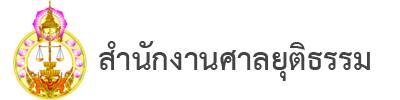
<style>
.page{position:relative;width:400px;height:100px;background:#ffffff}
.page>*{position:absolute;margin:0}
.t1{font:45.2px "THSarabunNew-Bold";color:#444444}
</style>
<div class="page">
<p class="t1" style="left:99px;top:41px;width:271px;height:40px">สำนักงานศาลยุติธรรม</p>
</div>
